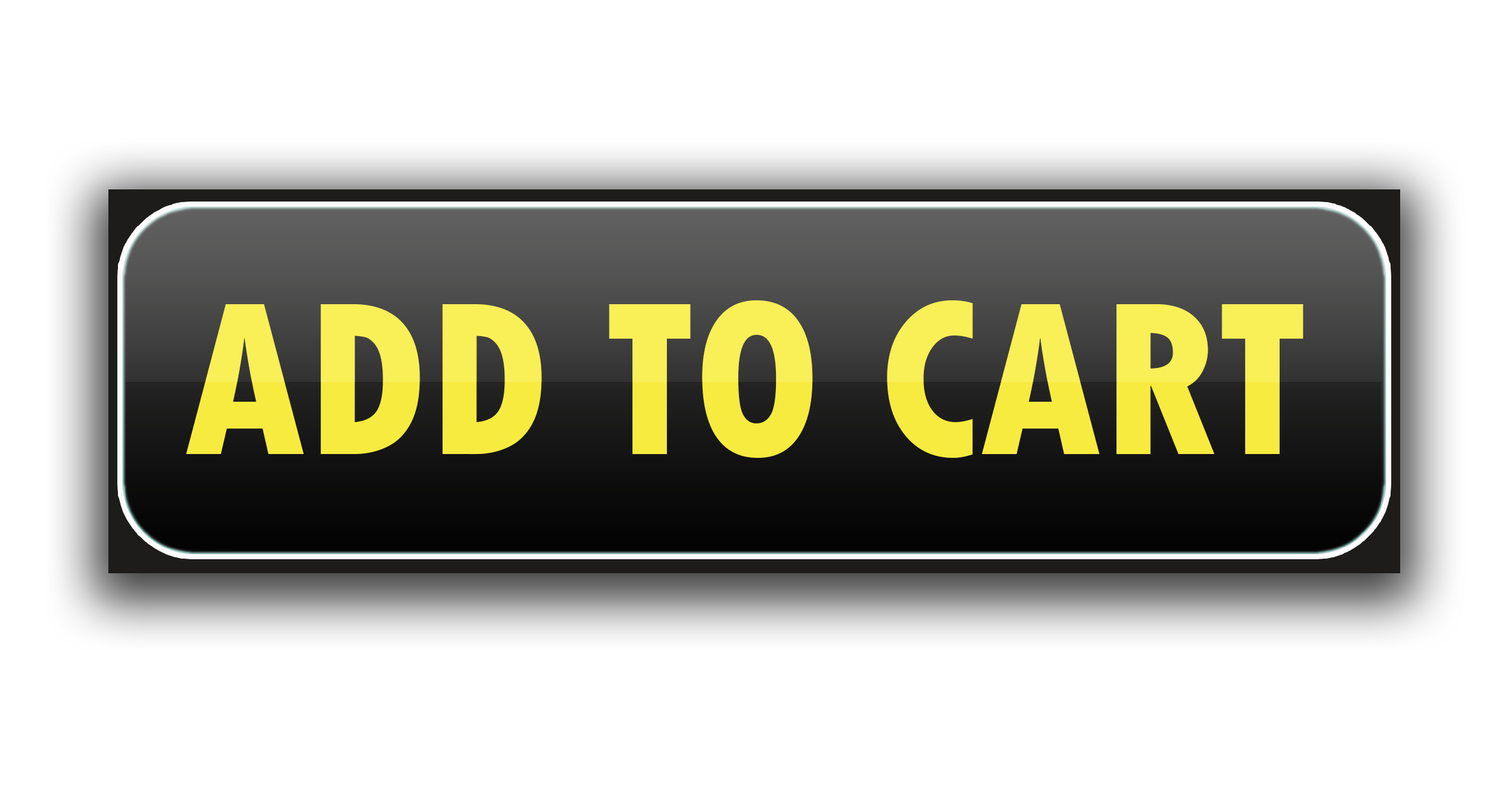
<style>
.page{position:relative;width:1506px;height:792px;background:#ffffff}
.page>*{position:absolute;margin:0}
.t1{font:229.5px "TwCenMT-CondensedExtraBold";color:#f9ef57}
</style>
<div class="page">
<p class="t1" style="left:186px;top:300px;width:1117px;height:158px">ADD TO CART</p>
</div>
